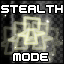
<style>
.page{position:relative;width:64px;height:64px}
.page>*{position:absolute;margin:0}
.t1{font:8px "M41_LOVEBIT";color:#ffffff}
</style>
<div class="page">
<p class="t1" style="left:1px;top:5px;width:62px;height:56px">STEALTH<br><br><br>    <br>     <br>            MODE</p>
</div>
